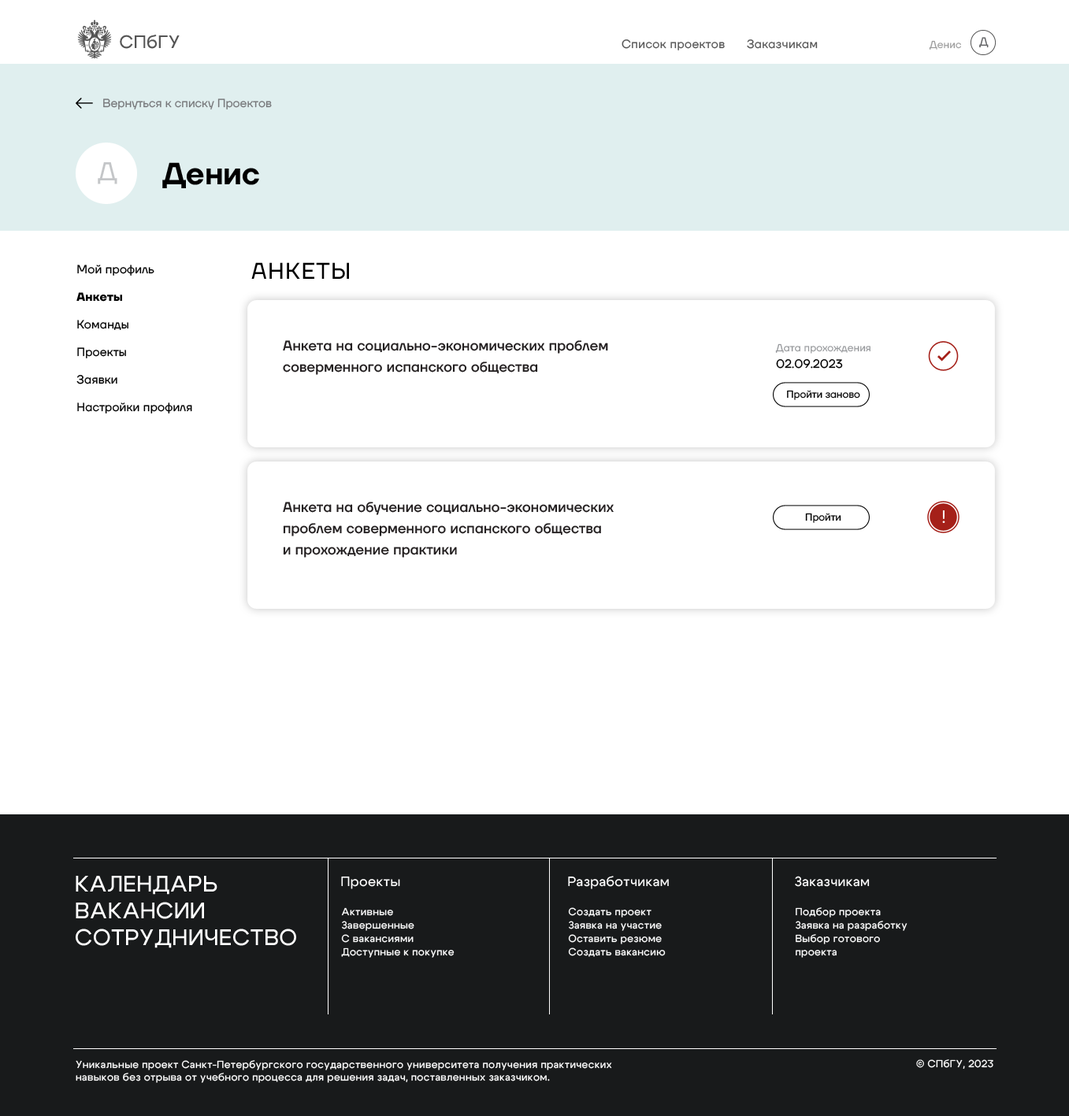
<style>
.page{position:relative;width:1069px;height:1116px;background:#ffffff}
.page>*{position:absolute;margin:0}
.t1{font:17.8px "Cygre-Medium";letter-spacing:0.025em;color:#555555}
.t2{font:11.8px "TTFirsNeue-Regular";letter-spacing:0.025em;color:#555555}
.t3{font:10.2px "TTFirsNeue-Regular";letter-spacing:0.01em;color:#9c9c9c}
.t4{font:11.8px "TTFirsNeue-Regular";color:#636466}
.t5{font:11.8px "TTFirsNeue-Regular";color:#77787b}
.t6{font:26px "TTFirsNeue-Regular";color:#c4c6c8}
.t7{font:30.7px "TTFirsNeue-DemiBold";color:#000000}
.t8{font:11.8px/27.6px "TTFirsNeue-Regular";letter-spacing:0.013em;color:#000000}
.t9{font:11.8px/27.6px "TTFirsNeue-Bold";letter-spacing:0.013em;color:#000000}
.t10{font:22.8px "TTFirsNeue-Regular";letter-spacing:0.05em;color:#000000}
.t11{font:14.2px/21.3px "TTFirsNeue-Medium";letter-spacing:0.01em;color:#231f20}
.t12{font:10.2px "TTFirsNeue-Regular";letter-spacing:0.01em;color:#97999c}
.t13{font:11.8px/16.5px "TTFirsNeue-Regular";letter-spacing:0.01em;color:#000000}
.t14{font:10.2px "TTFirsNeue-Regular";color:#000000}
.t15{font:22.4px "Cygre-Medium";letter-spacing:0.025em;color:#ffffff}
.t16{font:13.4px "Cygre-Medium";letter-spacing:0.025em;color:#ffffff}
.t17{font:10.3px/13.4px "Cygre-Medium";letter-spacing:0.025em;color:#ffffff}
.t18{font:10.3px "Cygre-Medium";letter-spacing:0.025em;color:#ffffff}
</style>
<div class="page">
<p class="t1" style="left:120px;top:34px;width:60px;height:15px">СПбГУ</p>
<p class="t2" style="left:621px;top:39px;width:196px;height:11px">Список проектов      Заказчикам</p>
<p class="t3" style="left:928px;top:40px;width:33px;height:10px">Денис</p>
<p class="t4" style="left:979px;top:37px;width:9px;height:11px">Д</p>
<p class="t5" style="left:103px;top:98px;width:169px;height:11px">Вернуться к списку Проектов</p>
<p class="t6" style="left:98px;top:162px;width:19px;height:22px">Д</p>
<p class="t7" style="left:162px;top:162px;width:97px;height:26px">Денис</p>
<p class="t8" style="left:76px;top:265px;width:116px;height:148px">Мой профиль<br><span class="t9">Анкеты<br></span>Команды<br>Проекты<br>Заявки<br>Настройки профиля</p>
<p class="t10" style="left:251px;top:262px;width:98px;height:17px">АНКЕТЫ</p>
<p class="t11" style="left:283px;top:340px;width:325px;height:35px">Анкета на социально-экономических проблем<br>соверменного испанского общества</p>
<p class="t12" style="left:775px;top:343px;width:95px;height:26px">Дата прохождения<br><span class="t13">02.09.2023</span></p>
<p class="t14" style="left:787px;top:390px;width:73px;height:10px">Пройти заново</p>
<p class="t11" style="left:283px;top:502px;width:330px;height:56px">Анкета на обучение социально-экономических проблем соверменного испанского общества<br>и прохождение практики</p>
<p class="t14" style="left:805px;top:513px;width:36px;height:10px">Пройти</p>
<p class="t15" style="left:76px;top:876px;width:220px;height:72px">КАЛЕНДАРЬ<br>ВАКАНСИИ<br>СОТРУДНИЧЕСТВО</p>
<p class="t16" style="left:341px;top:876px;width:59px;height:13px">Проекты</p>
<p class="t16" style="left:568px;top:876px;width:101px;height:13px">Разработчикам</p>
<p class="t16" style="left:795px;top:876px;width:74px;height:11px">Заказчикам</p>
<p class="t17" style="left:341px;top:907px;width:113px;height:51px">Активные<br>Завершенные<br>С вакансиями<br>Доступные к покупке</p>
<p class="t17" style="left:568px;top:907px;width:97px;height:50px">Создать проект<br>Заявка на участие<br>Оставить резюме<br>Создать вакансию</p>
<p class="t17" style="left:795px;top:907px;width:112px;height:51px">Подбор проекта<br>Заявка на разработку<br>Выбор готового<br>проекта</p>
<p class="t18" style="left:76px;top:1060px;width:536px;height:23px">Уникальные проект Санкт-Петербургского государственного университета получения практических навыков без отрыва от учебного процесса для решения задач, поставленных заказчиком.</p>
<p class="t18" style="left:916px;top:1059px;width:77px;height:10px">© СПбГУ, 2023</p>
</div>
